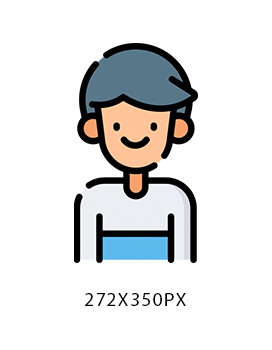
<style>
.page{position:relative;width:272px;height:350px;background:#ffffff}
.page>*{position:absolute;margin:0}
.t1{font:19.2px "MyriadPro-Regular";letter-spacing:0.07em;color:#000000;text-transform:uppercase}
</style>
<div class="page">
<p class="t1" style="left:85px;top:293px;width:101px;height:13px">272x350Px</p>
</div>
